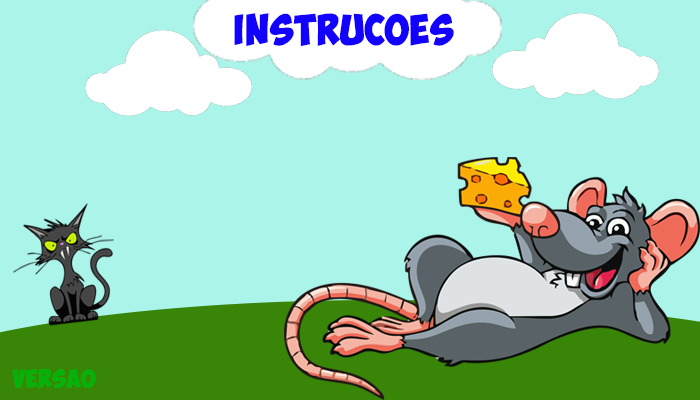
<style>
.page{position:relative;width:700px;height:400px;background:#abf4e9}
.page>*{position:absolute;margin:0}
.t1{font:30.3px "ObelixPro";letter-spacing:0.025em;color:#1301ff}
.t2{font:18px "ObelixPro";letter-spacing:0.025em;color:#06b20a}
</style>
<div class="page">
<p class="t1" style="left:234px;top:13px;width:220px;height:34px">instrucoes</p>
<p class="t2" style="left:12px;top:369px;width:84px;height:20px">versao</p>
</div>
